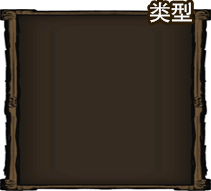
<style>
.page{position:relative;width:211px;height:191px;background:#362b21}
.page>*{position:absolute;margin:0}
.t1{font:21.8px "FZHTJW--GB1-0";letter-spacing:-0.025em;color:#ffffff;scale:1.04 1}
</style>
<div class="page">
<p class="t1" style="left:149px;top:2px;width:43px;height:21px">类型</p>
</div>
